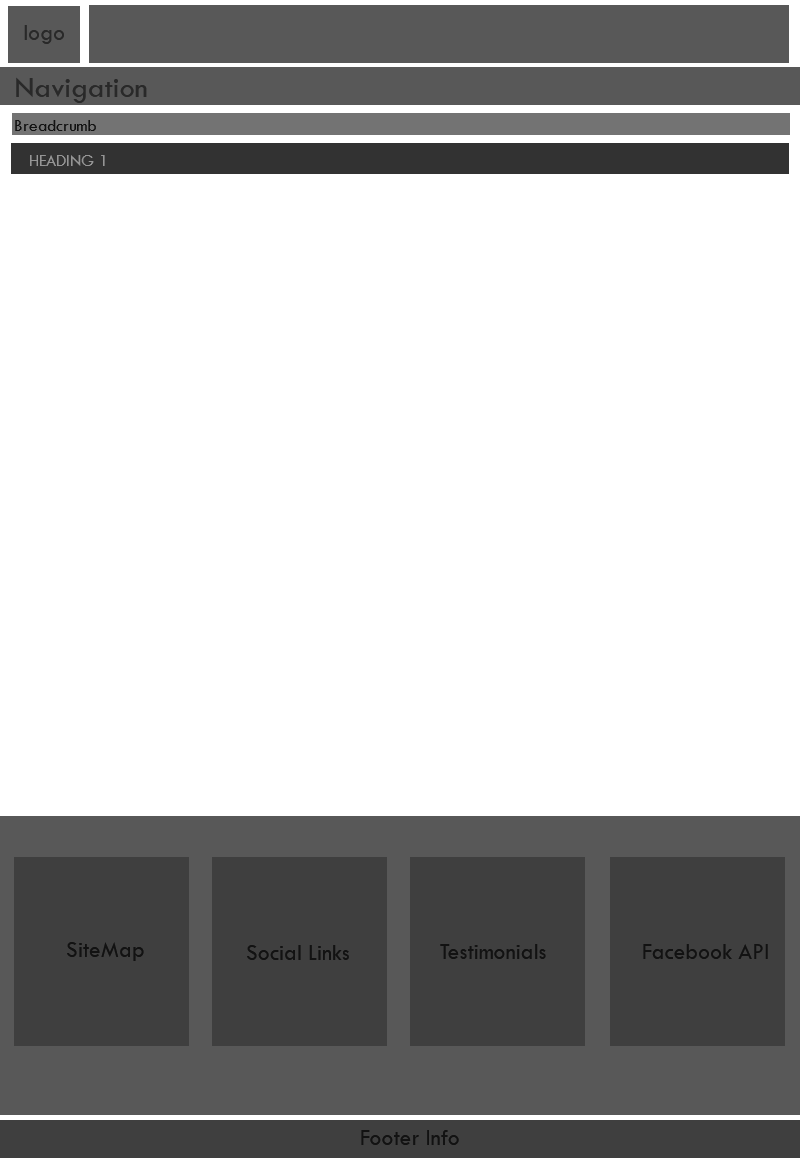
<style>
.page{position:relative;width:800px;height:1158px;background:#ffffff}
.page>*{position:absolute;margin:0}
.t1{font:23px "TwCenMT-Regular";color:#292929}
.t2{font:30px "TwCenMT-Regular";color:#292929}
.t3{font:17px "TwCenMT-Regular";color:#121212}
.t4{font:17px "TwCenMT-Regular";color:#969696}
.t5{font:23px "TwCenMT-Regular";color:#121212}
</style>
<div class="page">
<p class="t1" style="left:24px;top:25px;width:40px;height:19px">logo</p>
<p class="t2" style="left:16px;top:77px;width:131px;height:26px">Navigation</p>
<p class="t3" style="left:15px;top:120px;width:81px;height:11px">Breadcrumb</p>
<p class="t4" style="left:30px;top:155px;width:75px;height:11px">HEADING <span class="t3">1</span></p>
<p class="t5" style="left:67px;top:942px;width:77px;height:19px">SiteMap</p>
<p class="t5" style="left:247px;top:945px;width:102px;height:15px">Social Links</p>
<p class="t5" style="left:440px;top:944px;width:106px;height:15px">Testimonials</p>
<p class="t5" style="left:643px;top:944px;width:125px;height:15px">Facebook API</p>
<p class="t5" style="left:361px;top:1130px;width:98px;height:15px">Footer Info</p>
</div>
